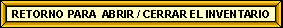
<style>
.page{position:relative;width:283px;height:28px;background:#ffffcc}
.page>*{position:absolute;margin:0}
.t1{font:11.3px "Arial-BoldMT";color:#000000}
</style>
<div class="page">
<p class="t1" style="left:12px;top:10px;width:257px;height:8px">RETORNO PARA  ABRIR / CERRAR EL INVENTARIO</p>
</div>
